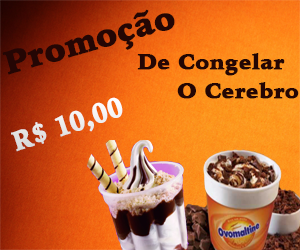
<style>
.page{position:relative;width:300px;height:250px}
.page>*{position:absolute;margin:0}
.t1{font:32px "IowanOldStyle-Black";color:#240604;font-weight:bold}
.t2{font:21.3px "IowanOldStyle-Black";color:#240604;font-weight:bold}
.t3{font:27.3px "IowanOldStyle-Black";color:#ececec;font-weight:bold;scale:0.84 1}
</style>
<div class="page">
<p class="t1" style="left:2px;top:9px;width:173px;height:66px;rotate:-16deg">Promoção</p>
<p class="t2" style="left:137px;top:53px;width:148px;height:23px">De Congelar</p>
<p class="t2" style="left:177px;top:82px;width:122px;height:17px">O Cerebro</p>
<p class="t3" style="left:11px;top:97px;width:112px;height:55px;rotate:-18deg">R$ 10,00</p>
</div>
